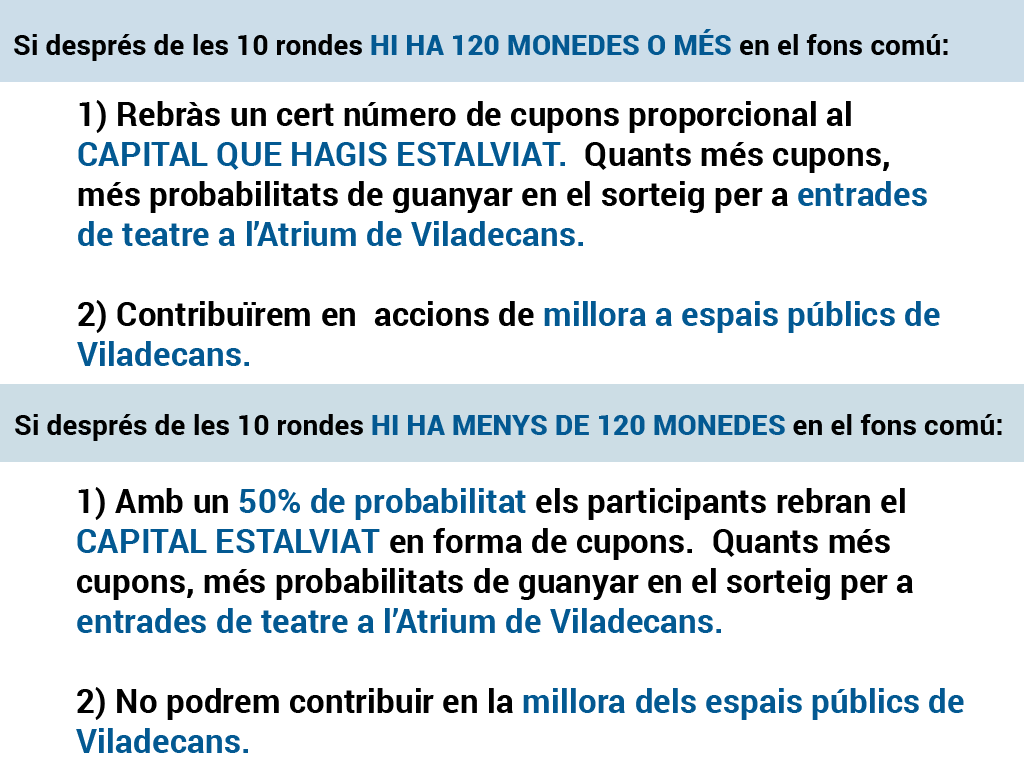
<style>
.page{position:relative;width:1024px;height:768px;background:#ffffff}
.page>*{position:absolute;margin:0}
.t1{font:28.3px "Roboto-Bold";color:#000000}
.t2{font:28.3px "Roboto-Black";color:#035992}
.t3{font:33.3px "Roboto-Bold";color:#000000}
.t4{font:33.3px "Roboto-Bold";color:#035992}
</style>
<div class="page">
<p class="t1" style="left:14px;top:29px;width:934px;height:32px">Si després de les 10 rondes <span class="t2">HI HA 120 MONEDES O MÉS </span>en el fons comú:</p>
<p class="t3" style="left:77px;top:100px;width:863px;height:266px">1) Rebràs un cert número de cupons proporcional al <br><span class="t4">CAPITAL QUE HAGIS ESTALVIAT.</span>  Quants més cupons, <br>més probabilitats de guanyar en el sorteig per a <span class="t4">entrades <br>de teatre a l’Atrium de Viladecans.<br></span><br>2) Contribuïrem en  accions de <span class="t4">millora a espais públics de <br>Viladecans.</span></p>
<p class="t1" style="left:15px;top:414px;width:987px;height:27px">Si després de les 10 rondes <span class="t2">HI HA MENYS DE 120 MONEDES </span>en el fons comú:</p>
<p class="t3" style="left:76px;top:487px;width:888px;height:266px">1) Amb un <span class="t4">50% de probabilitat</span> els participants rebran el <br><span class="t4">CAPITAL ESTALVIAT</span> en forma de cupons.  Quants més <br>cupons, més probabilitats de guanyar en el sorteig per a <br><span class="t4">entrades de teatre a l’Atrium de Viladecans.<br></span><br>2) No podrem contribuir en la <span class="t4">millora dels espais públics de <br>Viladecans.</span></p>
</div>
